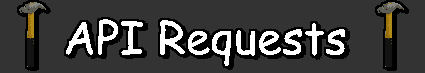
<style>
.page{position:relative;width:425px;height:73px;background:#333333}
.page>*{position:absolute;margin:0}
.t1{font:45px "ComicSansMS";color:#ffffff}
</style>
<div class="page">
<p class="t1" style="left:65px;top:19px;width:281px;height:48px">API Requests</p>
</div>
